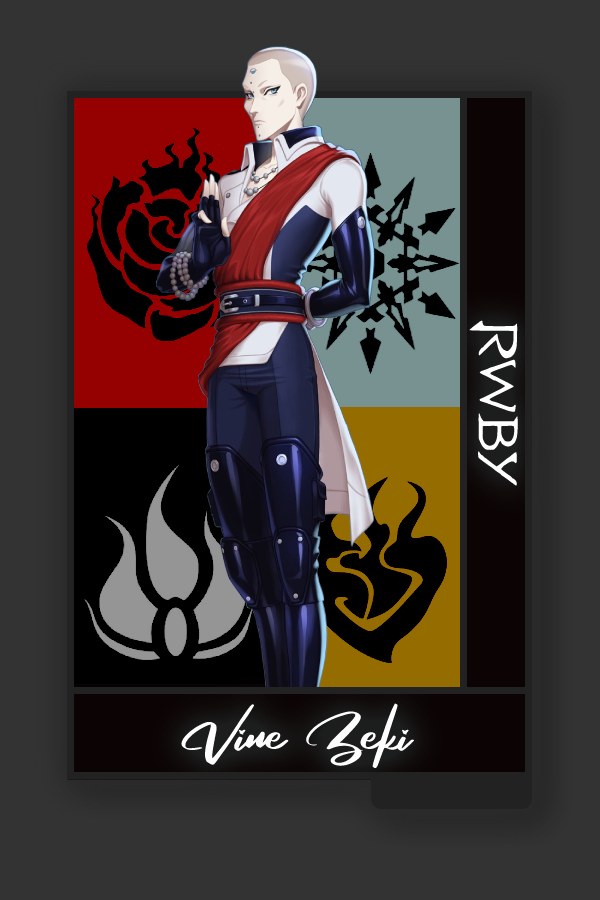
<style>
.page{position:relative;width:600px;height:900px;background:#333333}
.page>*{position:absolute;margin:0}
.t1{font:61.3px "RWBY_Style";color:#ffffff;scale:1.25 1}
.t2{font:76.6px "RosegaFREE";color:#ffffff;scale:0.91 1}
</style>
<div class="page">
<p class="t1" style="left:469px;top:320px;width:49px;height:166px;rotate:90deg">RWBY</p>
<p class="t2" style="left:180px;top:703px;width:235px;height:68px">Vine Zeki</p>
</div>
